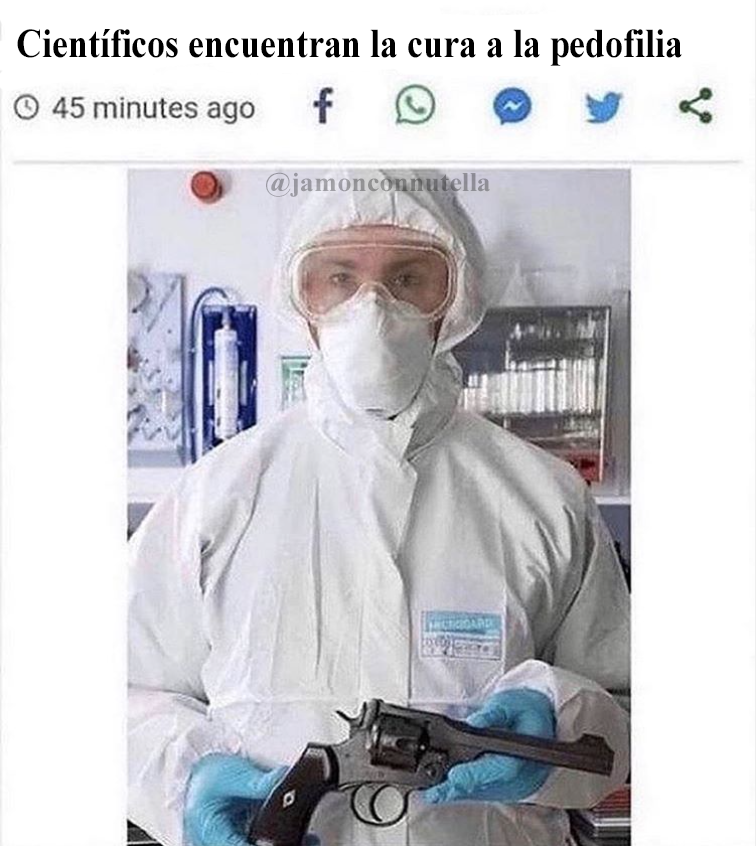
<style>
.page{position:relative;width:756px;height:846px;background:#ffffff}
.page>*{position:absolute;margin:0}
.t1{font:41.1px "TimesNewRomanPS-BoldMT";color:#000000;scale:0.87 1}
.t2{font:27.1px "TimesNewRomanPS-BoldMT";scale:1.03 1}
</style>
<div class="page">
<p class="t1" style="left:17px;top:29px;width:665px;height:37px">Científicos encuentran la cura a la pedofilia</p>
<p class="t2" style="left:266px;top:172px;width:224px;height:25px">@jamonconnutella</p>
</div>
